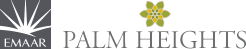
<style>
.page{position:relative;width:246px;height:49px;background:#ffffff}
.page>*{position:absolute;margin:0}
.t1{font:25.5px "AGaramondLT-Titling";color:#6c6e70}
</style>
<div class="page">
<p class="t1" style="left:63px;top:30px;width:183px;height:19px">PALM HEIGHTS</p>
</div>
